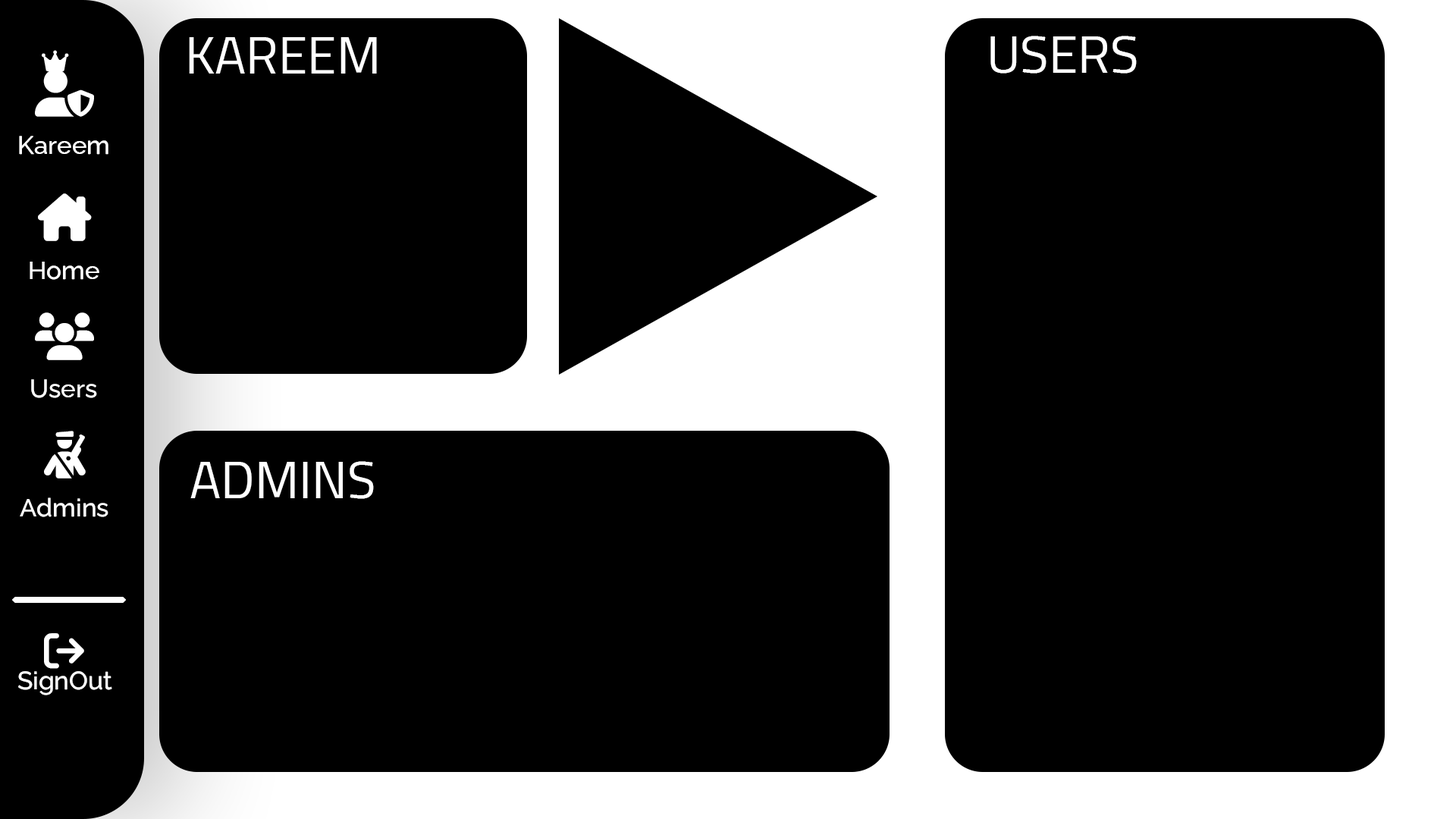
<style>
.page{position:relative;width:1456px;height:819px;background:#000000}
.page>*{position:absolute;margin:0}
.t1{font:52.6px "Cairo-Regular";color:#ffffff;text-transform:uppercase}
.t2{font:25.3px "RalewayRoman-Medium";color:#ffffff}
</style>
<div class="page">
<p class="t1" style="left:189px;top:37px;width:188px;height:37px">Kareem</p>
<p class="t1" style="left:990px;top:36px;width:147px;height:38px">Users</p>
<p class="t2" style="left:19px;top:136px;width:89px;height:19px">Kareem</p>
<p class="t2" style="left:30px;top:262px;width:69px;height:18px">Home</p>
<p class="t2" style="left:31px;top:379px;width:66px;height:19px">Users</p>
<p class="t1" style="left:190px;top:461px;width:184px;height:38px">Admins</p>
<p class="t2" style="left:20px;top:497px;width:88px;height:20px">Admins</p>
<p class="t2" style="left:18px;top:671px;width:94px;height:24px">SignOut</p>
</div>
